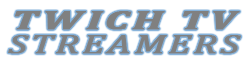
<style>
.page{position:relative;width:250px;height:65px;background:#ffffff}
.page>*{position:absolute;margin:0}
.t1{font:27.4px "Cambria-BoldItalic";letter-spacing:0.06em;color:#808080;font-weight:bold;scale:1.58 1}
.t2{font:27.4px "Cambria-Italic";letter-spacing:0.06em;color:#808080;font-weight:bold;scale:1.42 1}
</style>
<div class="page">
<p class="t1" style="left:15px;top:11px;width:225px;height:19px">TWICH TV</p>
<p class="t2" style="left:8px;top:35px;width:233px;height:19px">STREAMERS</p>
</div>
